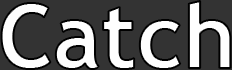
<style>
.page{position:relative;width:232px;height:70px;background:#333333}
.page>*{position:absolute;margin:0}
.t1{font:90px "TrebuchetMS-Bold";color:#fefefe}
</style>
<div class="page">
<p class="t1" style="left:1px;top:1px;width:230px;height:68px">Catch</p>
</div>
